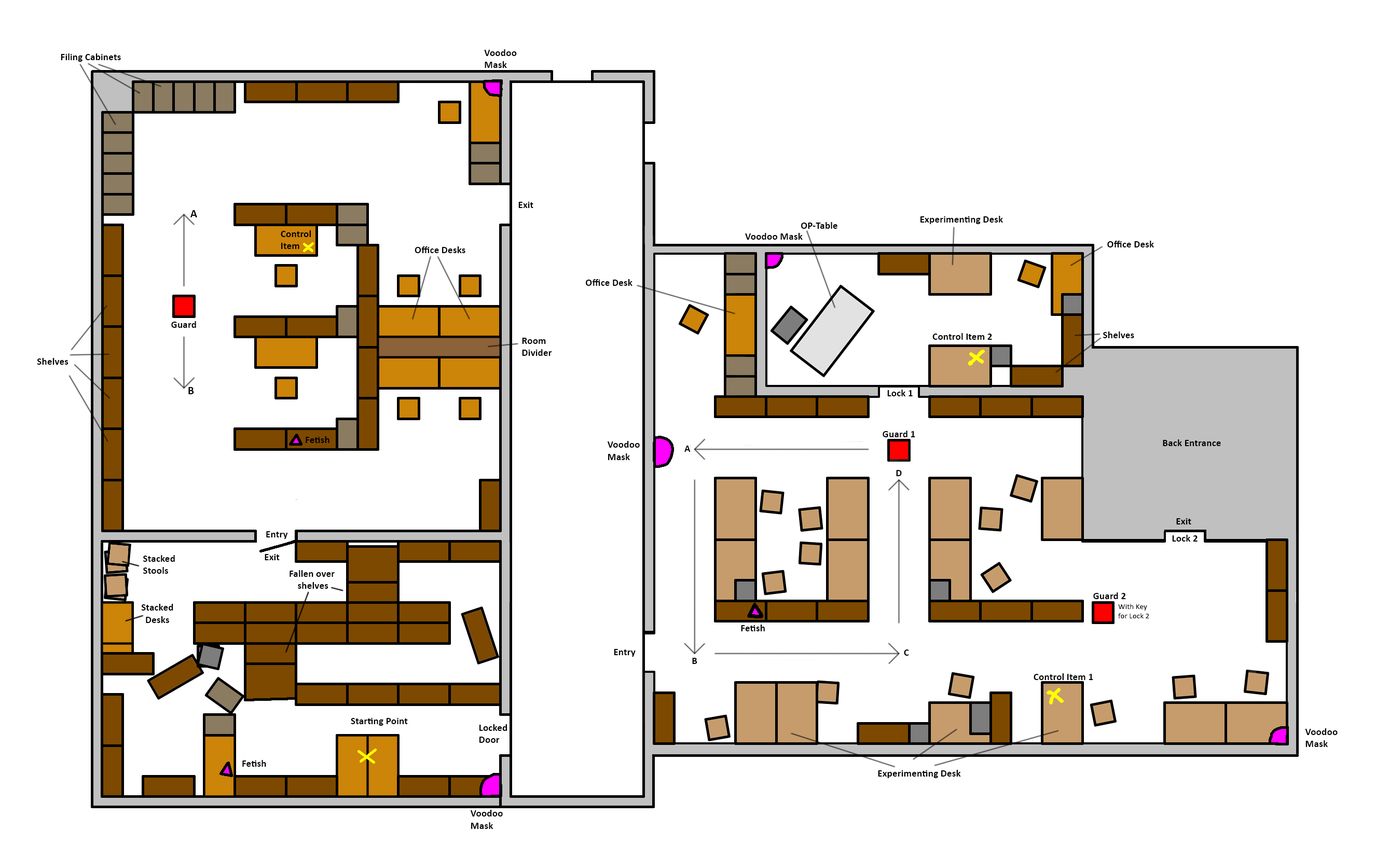
<style>
.page{position:relative;width:1389px;height:858px;background:#ffffff}
.page>*{position:absolute;margin:0}
.t1{font:10.1px "Calibri-Bold";color:#000000}
.t2{font:11.5px "Calibri-Bold";color:#000000}
.t3{font:7.9px "Calibri";color:#000000}
</style>
<div class="page">
<p class="t1" style="left:61px;top:53px;width:60px;height:9px">Filing Cabinets</p>
<p class="t1" style="left:484px;top:49px;width:33px;height:19px">Voodoo<br>Mask</p>
<p class="t1" style="left:518px;top:202px;width:15px;height:6px">Exit</p>
<p class="t2" style="left:190px;top:210px;width:7px;height:7px">A</p>
<p class="t1" style="left:921px;top:216px;width:82px;height:8px">Experimenting Desk</p>
<p class="t1" style="left:281px;top:230px;width:30px;height:19px">Control<br>Item</p>
<p class="t1" style="left:745px;top:233px;width:58px;height:7px">Voodoo Mask</p>
<p class="t1" style="left:801px;top:222px;width:37px;height:7px">OP-Table</p>
<p class="t1" style="left:1107px;top:241px;width:47px;height:7px">Office Desk</p>
<p class="t1" style="left:415px;top:247px;width:50px;height:6px">Office Desks</p>
<p class="t1" style="left:586px;top:279px;width:47px;height:7px">Office Desk</p>
<p class="t1" style="left:171px;top:321px;width:25px;height:7px">Guard</p>
<p class="t1" style="left:522px;top:338px;width:30px;height:18px">Room<br>Divider</p>
<p class="t1" style="left:933px;top:333px;width:59px;height:7px">Control Item 2</p>
<p class="t1" style="left:1103px;top:332px;width:31px;height:6px">Shelves</p>
<p class="t1" style="left:37px;top:358px;width:32px;height:7px">Shelves</p>
<p class="t2" style="left:188px;top:387px;width:6px;height:7px">B</p>
<p class="t1" style="left:887px;top:390px;width:26px;height:6px">Lock 1</p>
<p class="t1" style="left:306px;top:436px;width:24px;height:7px">Fetish</p>
<p class="t1" style="left:883px;top:431px;width:32px;height:6px">Guard 1</p>
<p class="t1" style="left:608px;top:441px;width:32px;height:19px">Voodoo<br>Mask</p>
<p class="t1" style="left:684px;top:446px;width:7px;height:6px">A</p>
<p class="t1" style="left:896px;top:470px;width:6px;height:6px">D</p>
<p class="t1" style="left:1176px;top:518px;width:16px;height:7px">Exit</p>
<p class="t1" style="left:266px;top:531px;width:22px;height:8px">Entry</p>
<p class="t1" style="left:1172px;top:535px;width:26px;height:7px">Lock 2</p>
<p class="t1" style="left:143px;top:555px;width:32px;height:19px">Stacked<br>Stools</p>
<p class="t1" style="left:265px;top:554px;width:15px;height:6px">Exit</p>
<p class="t1" style="left:290px;top:570px;width:45px;height:19px;text-align:center">Fallen over <br>shelves</p>
<p class="t1" style="left:1093px;top:593px;width:33px;height:6px">Guard 2</p>
<p class="t1" style="left:141px;top:604px;width:32px;height:19px;text-align:center">Stacked<br>Desks</p>
<p class="t3" style="left:1118px;top:604px;width:31px;height:15px">With Key<br>for Lock 2</p>
<p class="t1" style="left:741px;top:625px;width:24px;height:7px">Fetish</p>
<p class="t1" style="left:614px;top:649px;width:22px;height:8px">Entry</p>
<p class="t1" style="left:904px;top:650px;width:5px;height:6px">C</p>
<p class="t1" style="left:692px;top:658px;width:5px;height:6px">B</p>
<p class="t1" style="left:1034px;top:674px;width:59px;height:6px">Control Item 1</p>
<p class="t1" style="left:351px;top:718px;width:57px;height:8px">Starting Point</p>
<p class="t1" style="left:480px;top:724px;width:27px;height:19px">Locked<br>Door</p>
<p class="t1" style="left:1305px;top:729px;width:33px;height:18px">Voodoo<br>Mask</p>
<p class="t1" style="left:242px;top:760px;width:24px;height:7px">Fetish</p>
<p class="t1" style="left:878px;top:770px;width:83px;height:8px">Experimenting Desk</p>
<p class="t1" style="left:471px;top:810px;width:32px;height:19px">Voodoo<br>Mask</p>
</div>
